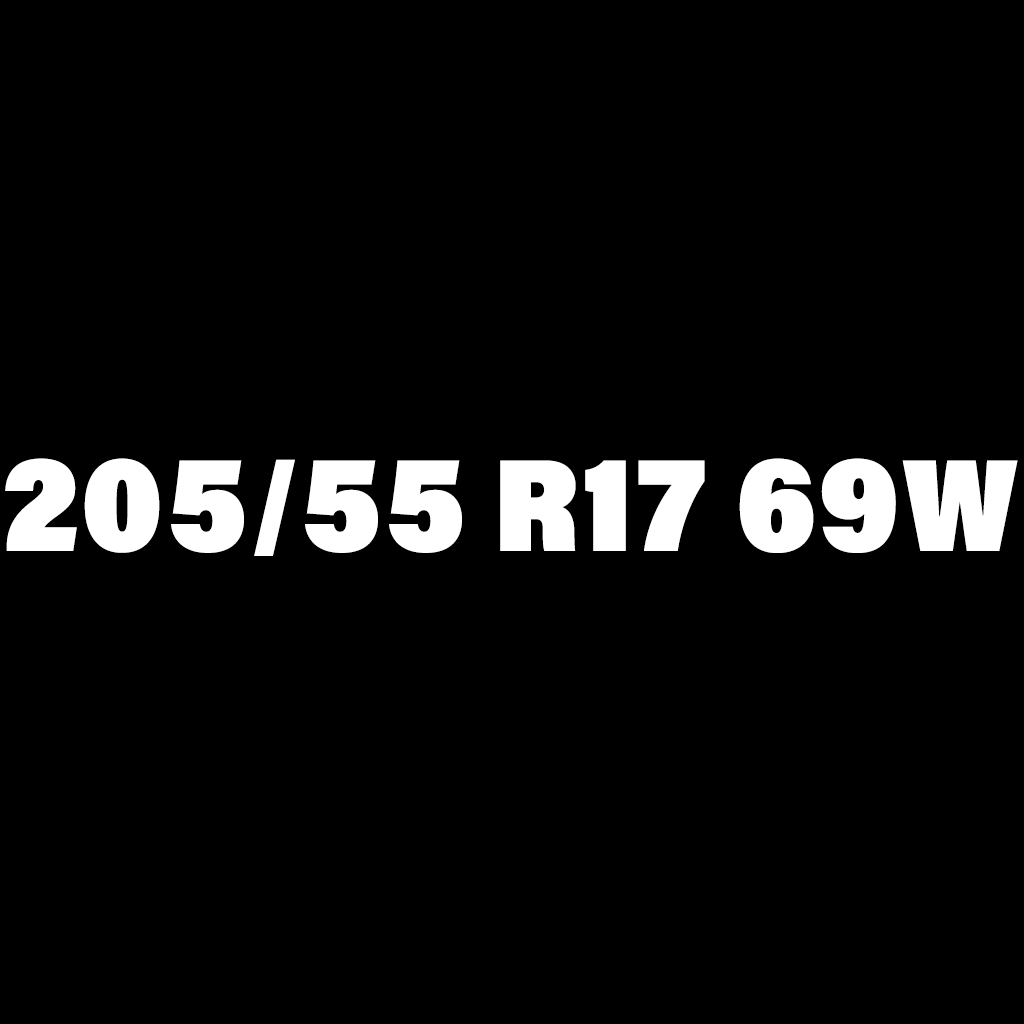
<style>
.page{position:relative;width:1024px;height:1024px;background:#000000}
.page>*{position:absolute;margin:0}
.t1{font:131px "AcuminConcept-UltraBlack";letter-spacing:0.03em;color:#ffffff;text-transform:uppercase;scale:0.88 1}
</style>
<div class="page">
<p class="t1" style="left:5px;top:458px;width:1013px;height:98px">205/55 r17 69w</p>
</div>
